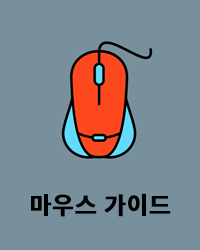
<style>
.page{position:relative;width:200px;height:250px;background:#78909c}
.page>*{position:absolute;margin:0}
.t1{font:24px "SpoqaHanSansNeo-Bold";color:#000000;font-weight:bold}
</style>
<div class="page">
<p class="t1" style="left:31px;top:193px;width:140px;height:24px">마우스 가이드</p>
</div>
